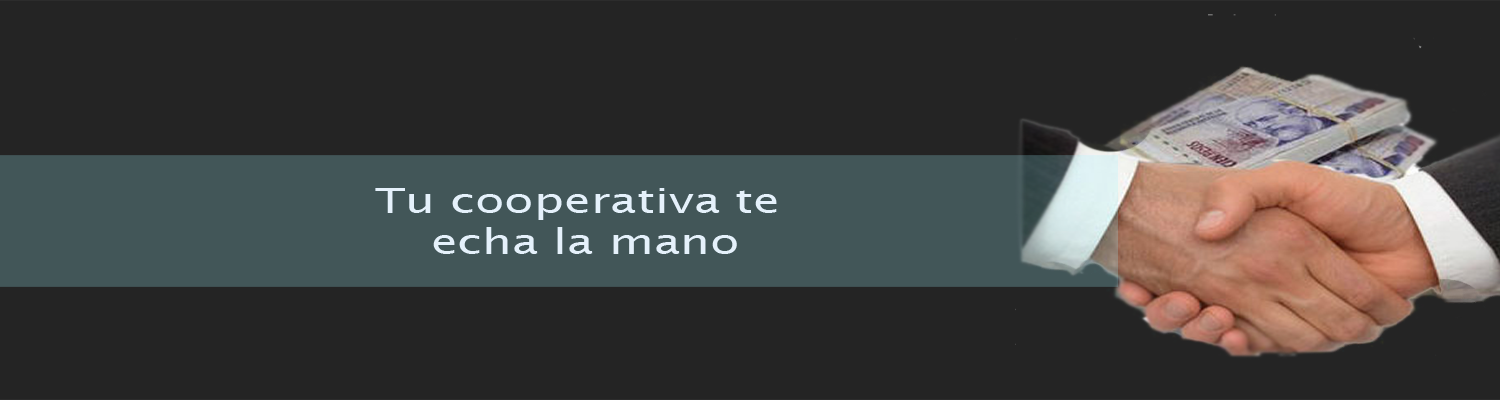
<style>
.page{position:relative;width:1500px;height:400px;background:#242424}
.page>*{position:absolute;margin:0}
.t1{font:34.9px "LucidaSans";color:#e5f1fb;scale:1.38 1}
</style>
<div class="page">
<p class="t1" style="left:375px;top:188px;width:402px;height:66px;text-align:center">Tu cooperativa te <br>echa la mano</p>
</div>
